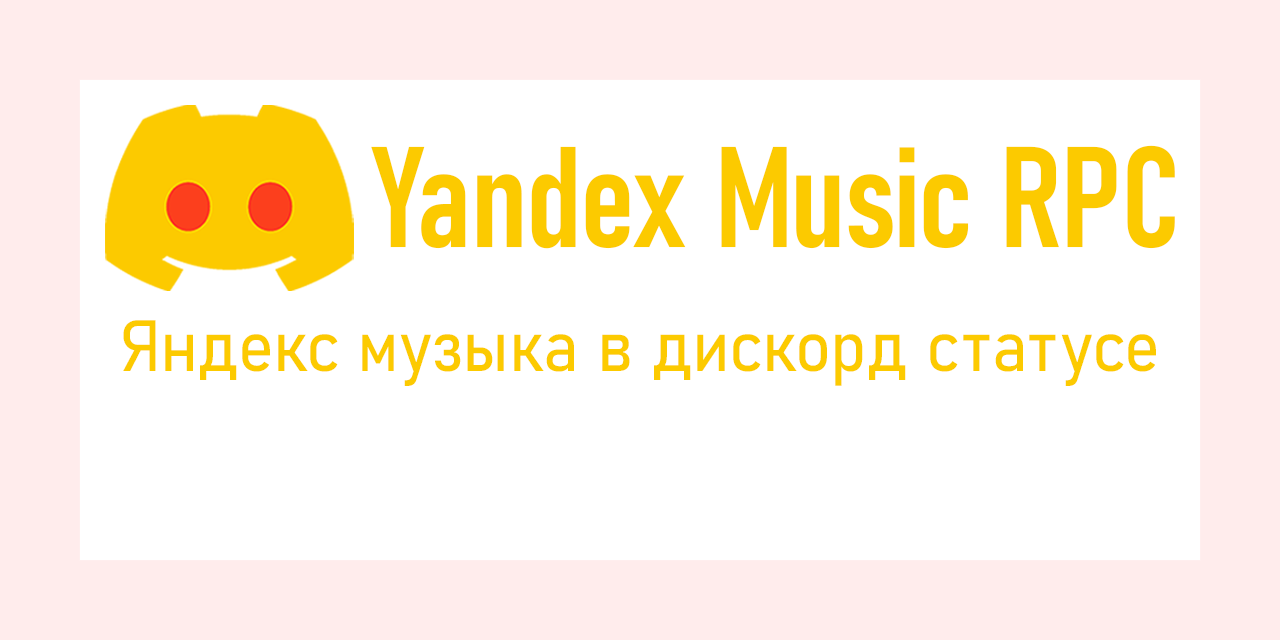
<style>
.page{position:relative;width:1280px;height:640px;background:#ffffff}
.page>*{position:absolute;margin:0}
.t1{font:141px "Bahnschrift_583.000wght_75.000wdth";color:#fcca00}
.t2{font:71.4px "Bahnschrift_362.000wght_94.000wdth";color:#fcca00}
</style>
<div class="page">
<p class="t1" style="left:371px;top:145px;width:804px;height:104px">Yandex Music RPC</p>
<p class="t2" style="left:123px;top:320px;width:1033px;height:66px">Яндекс музыка в дискорд статусе</p>
</div>
